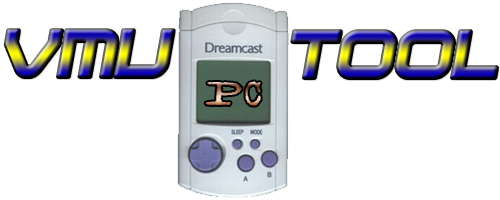
<style>
.page{position:relative;width:500px;height:200px;background:#ffffff}
.page>*{position:absolute;margin:0}
.t1{font:72px "FFX-Terminator";font-style:italic}
.t2{font:36px "Facelift"}
</style>
<div class="page">
<p class="t1" style="left:5px;top:30px;width:169px;height:47px">VMU</p>
<p class="t1" style="left:292px;top:31px;width:205px;height:47px">TOOL</p>
<p class="t2" style="left:205px;top:81px;width:56px;height:25px">PC</p>
</div>
